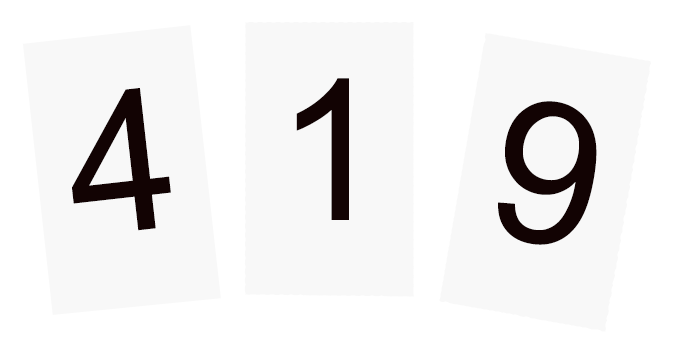
<style>
.page{position:relative;width:675px;height:351px;background:#f8f8f8}
.page>*{position:absolute;margin:0}
.t1{font:197px "ArialMT";color:#120303}
</style>
<div class="page">
<p class="t1" style="left:296px;top:78px;width:53px;height:142px">1</p>
<p class="t1" style="left:72px;top:88px;width:99px;height:143px;rotate:-6deg">4</p>
<p class="t1" style="left:498px;top:101px;width:99px;height:144px;rotate:10deg">9</p>
</div>
